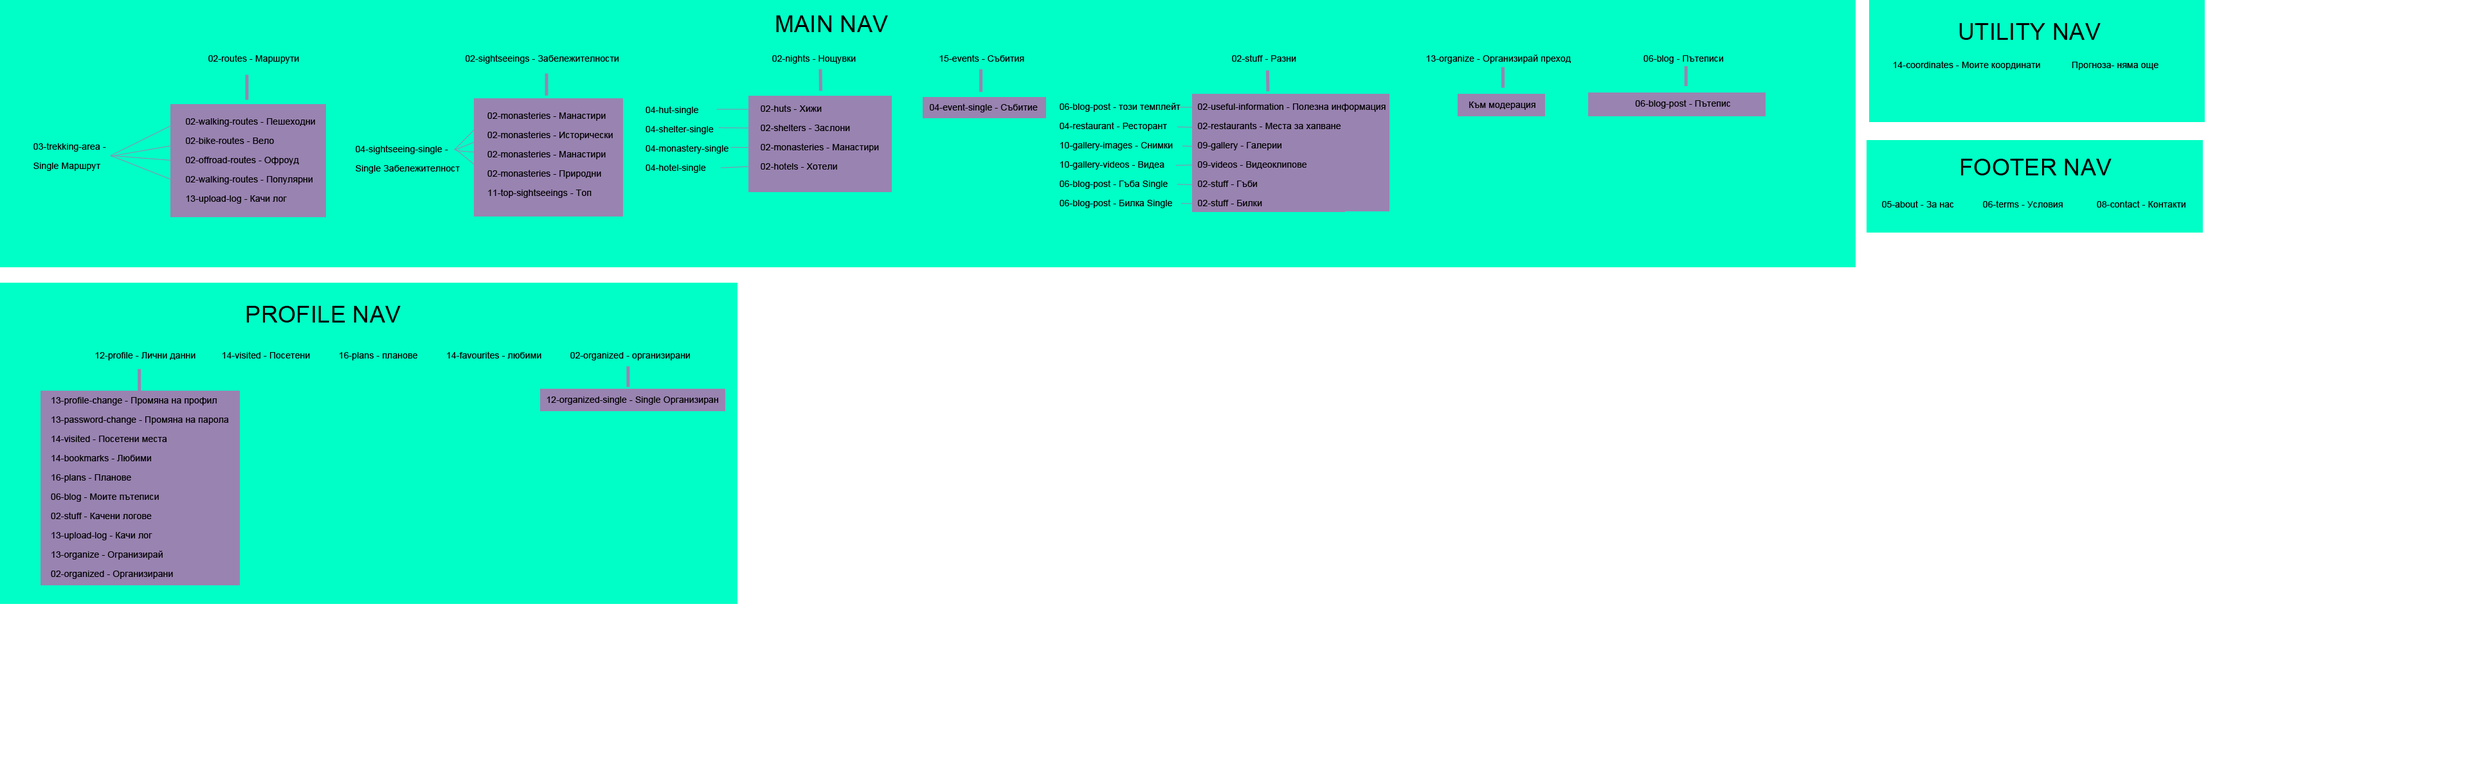
<style>
.page{position:relative;width:2469px;height:771px;background:#ffffff}
.page>*{position:absolute;margin:0}
.t1{font:23.1px "ArialMT";letter-spacing:0.01em;color:#000000}
.t2{font:9px "ArialMT";letter-spacing:0.01em;color:#000000}
.t3{font:9px/19.3px "ArialMT";letter-spacing:0.01em;color:#000000}
</style>
<div class="page">
<p class="t1" style="left:776px;top:15px;width:112px;height:17px">MAIN NAV</p>
<p class="t1" style="left:1959px;top:23px;width:141px;height:17px">UTILITY NAV</p>
<p class="t2" style="left:208px;top:55px;width:1515px;height:9px">02-routes - Маршрути                                                                02-sightseeings - Забележителности                                                           02-nights - Нощувки                                15-events - Събития                                                                                02-stuff - Разни                                                  13-organize - Организирай преход                            06-blog - Пътеписи</p>
<p class="t2" style="left:1893px;top:61px;width:265px;height:9px">14-coordinates - Моите координати            Прогноза- няма още</p>
<p class="t2" style="left:1469px;top:102px;width:66px;height:8px">Към модерация</p>
<p class="t2" style="left:1635px;top:100px;width:95px;height:9px">06-blog-post - Пътепис</p>
<p class="t3" style="left:487px;top:112px;width:126px;height:86px;text-align:justify">02-monasteries - Манастири<br>02-monasteries - Исторически<br>02-monasteries - Манастири<br>02-monasteries - Природни<br>11-top-sightseeings - Топ</p>
<p class="t3" style="left:645px;top:106px;width:83px;height:67px;text-align:justify">04-hut-single<br>04-shelter-single<br>04-monastery-single<br>04-hotel-single</p>
<p class="t3" style="left:760px;top:105px;width:119px;height:65px;text-align:justify">02-huts - Хижи<br>02-shelters - Заслони<br>02-monasteries - Манастири<br>02-hotels - Хотели</p>
<p class="t2" style="left:930px;top:104px;width:108px;height:9px">04-event-single - Събитие</p>
<p class="t3" style="left:1059px;top:103px;width:121px;height:105px;text-align:justify">06-blog-post - този темплейт<br>04-restaurant - Ресторант<br>10-gallery-images - Снимки<br>10-gallery-videos - Видеа<br>06-blog-post - Гъбa Single<br>06-blog-post - Билка Single</p>
<p class="t3" style="left:1198px;top:103px;width:187px;height:103px;text-align:justify">02-useful-information - Полезна информация<br>02-restaurants - Места за хапване<br>09-gallery - Галерии<br>09-videos - Видеоклипове<br>02-stuff - Гъби<br>02-stuff - Билки</p>
<p class="t3" style="left:186px;top:118px;width:129px;height:86px;text-align:justify">02-walking-routes - Пешеходни<br>02-bike-routes - Вело<br>02-offroad-routes - Офроуд<br>02-walking-routes - Популярни<br>13-upload-log - Качи лог</p>
<p class="t3" style="left:33px;top:143px;width:73px;height:28px;text-align:justify">03-trekking-area - <br>Single Маршрут</p>
<p class="t3" style="left:356px;top:145px;width:104px;height:29px;text-align:justify">04-sightseeing-single -<br>Single Забележителност</p>
<p class="t1" style="left:1961px;top:159px;width:150px;height:17px">FOOTER NAV</p>
<p class="t2" style="left:1882px;top:201px;width:303px;height:7px">05-about - За нас           06-terms - Условия             08-contact - Контакти</p>
<p class="t1" style="left:246px;top:306px;width:155px;height:17px">PROFILE NAV</p>
<p class="t2" style="left:95px;top:352px;width:595px;height:9px">12-profile - Лични данни          14-visited - Посетени           16-plans - планове           14-favourites - любими           02-organized - организирани</p>
<p class="t3" style="left:51px;top:397px;width:178px;height:182px;text-align:justify">13-profile-change - Промяна на профил<br>13-password-change - Промяна на парола<br>14-visited - Посетени места<br>14-bookmarks - Любими<br>16-plans - Планове<br>06-blog - Моите пътеписи<br>02-stuff - Качени логове<br>13-upload-log - Качи лог<br>13-organize - Огранизирай<br>02-organized - Организирани</p>
<p class="t2" style="left:546px;top:397px;width:172px;height:8px">12-organized-single - Single Oрганизиран</p>
</div>
